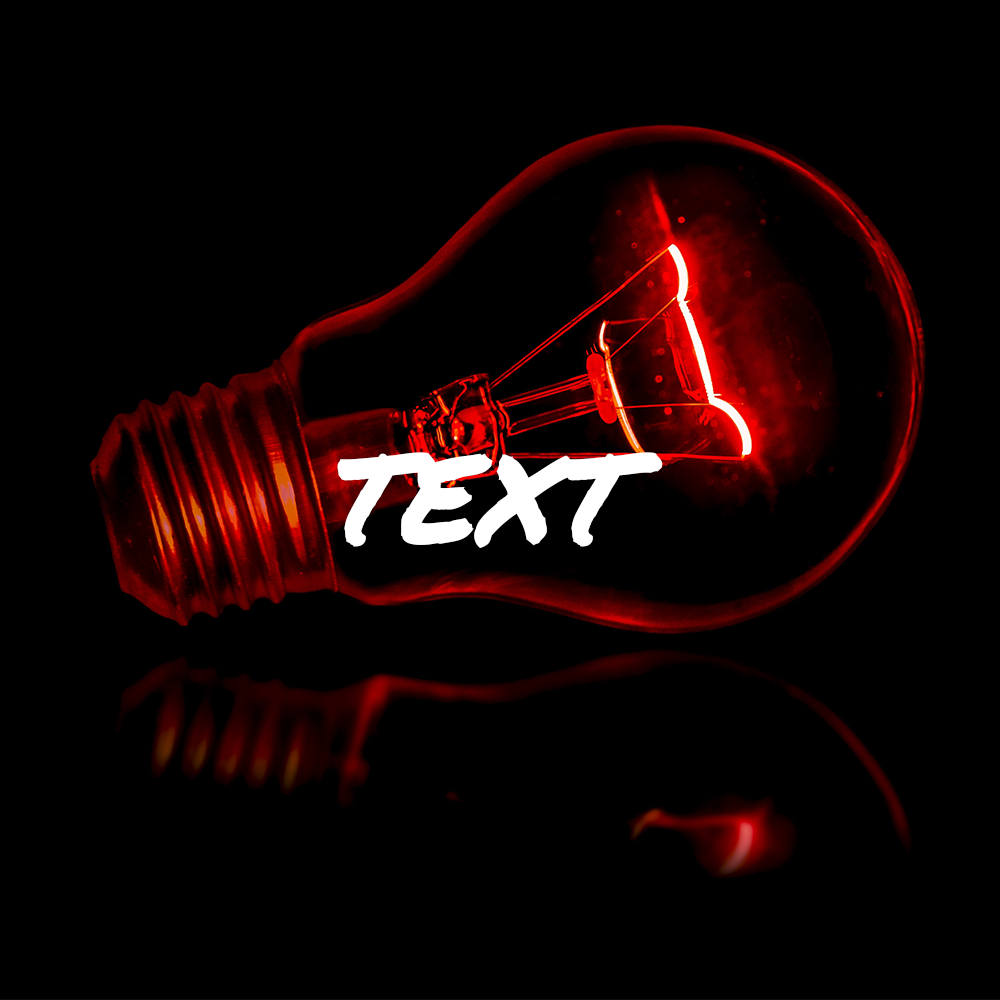
<style>
.page{position:relative;width:1000px;height:1000px;background:#000000}
.page>*{position:absolute;margin:0}
.t1{font:150px "PermanentMarker-Regular";color:#ffffff;font-style:italic}
</style>
<div class="page">
<p class="t1" style="left:337px;top:452px;width:326px;height:96px">text</p>
</div>
